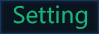
<style>
.page{position:relative;width:99px;height:34px;background:#0a1421}
.page>*{position:absolute;margin:0}
.t1{font:24px "SegoeUISymbol";color:#19b579}
</style>
<div class="page">
<p class="t1" style="left:13px;top:5px;width:75px;height:24px">Setting</p>
</div>
